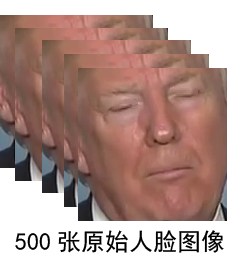
<style>
.page{position:relative;width:248px;height:264px;background:#ffffff}
.page>*{position:absolute;margin:0}
.t1{font:24px "SimHei";color:#000000}
</style>
<div class="page">
<p class="t1" style="left:15px;top:230px;width:209px;height:23px">500张原始人脸图像</p>
</div>
